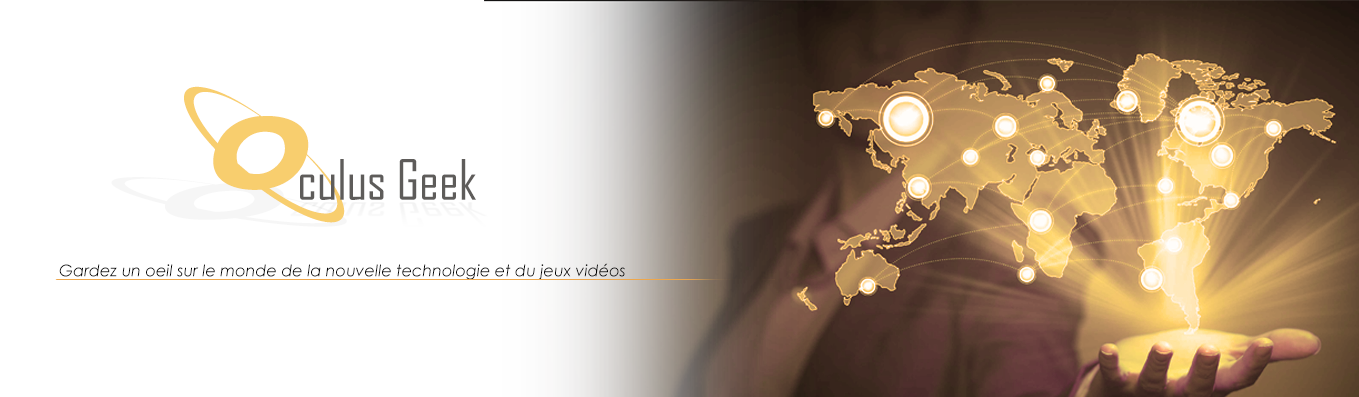
<style>
.page{position:relative;width:1359px;height:397px;background:#ffffff}
.page>*{position:absolute;margin:0}
.t1{font:124.2px "13Misa";color:#f8ce6e}
.t2{font:53.4px "AgencyFB-Reg";color:#5e5c5a}
.t3{font:16px "CenturyGothic-Italic";color:#000000}
</style>
<div class="page">
<p class="t1" style="left:184px;top:86px;width:161px;height:137px;rotate:3deg">O</p>
<p class="t2" style="left:300px;top:159px;width:176px;height:41px">culus Geek</p>
<p class="t3" style="left:59px;top:263px;width:566px;height:17px">Gardez un oeil sur le monde de la nouvelle technologie et du jeux vidéos</p>
</div>
